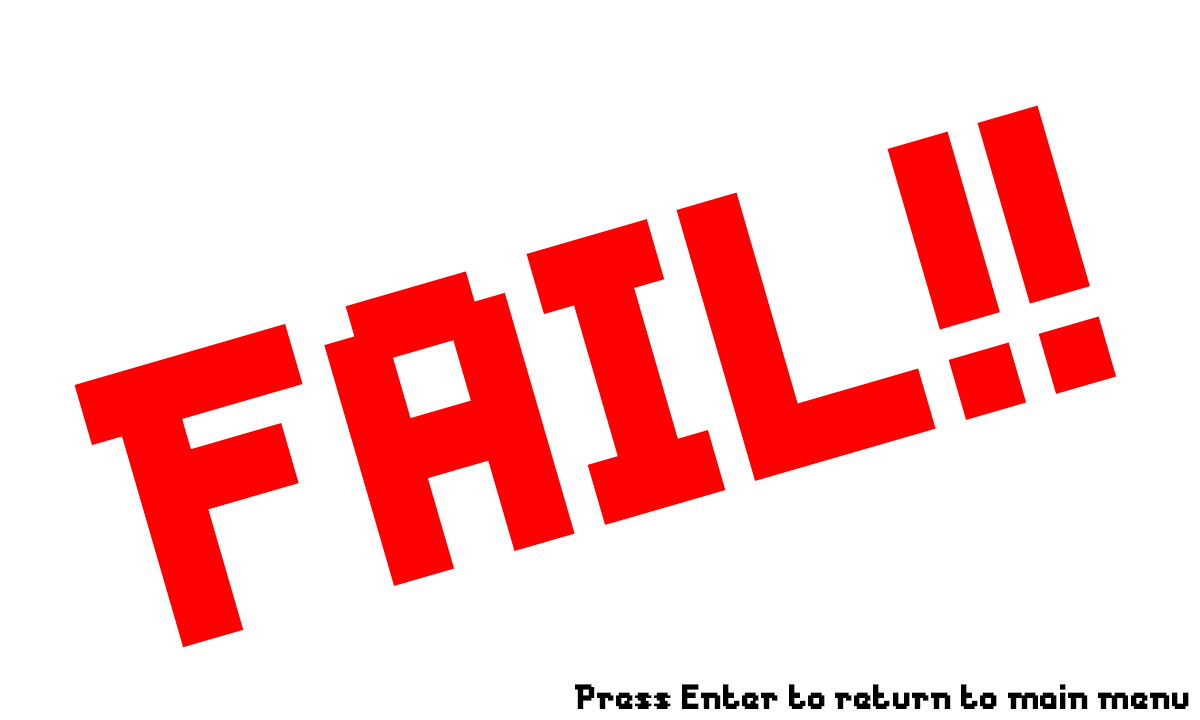
<style>
.page{position:relative;width:1200px;height:720px;background:#ffffff}
.page>*{position:absolute;margin:0}
.t1{font:376.3px "Messe-Duesseldorf";color:#ff0000}
.t2{font:32.9px "Messe-Duesseldorf";color:#000000}
</style>
<div class="page">
<p class="t1" style="left:74px;top:105px;width:1043px;height:543px;rotate:-16deg">FAIL!!</p>
<p class="t2" style="left:575px;top:684px;width:614px;height:25px">Press Enter to return to main menu</p>
</div>
